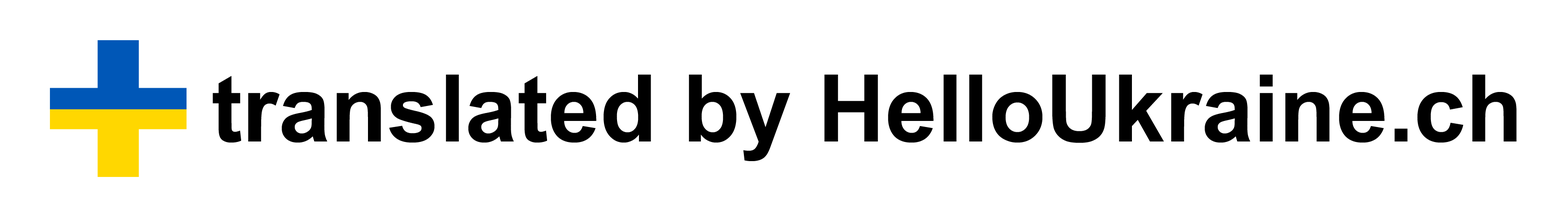
<style>
.page{position:relative;width:1568px;height:212px;background:#ffffff}
.page>*{position:absolute;margin:0}
.t1{font:93.3px "Arial-BoldMT";color:#000000}
</style>
<div class="page">
<p class="t1" style="left:213px;top:74px;width:1304px;height:87px">translated by HelloUkraine.ch</p>
</div>
